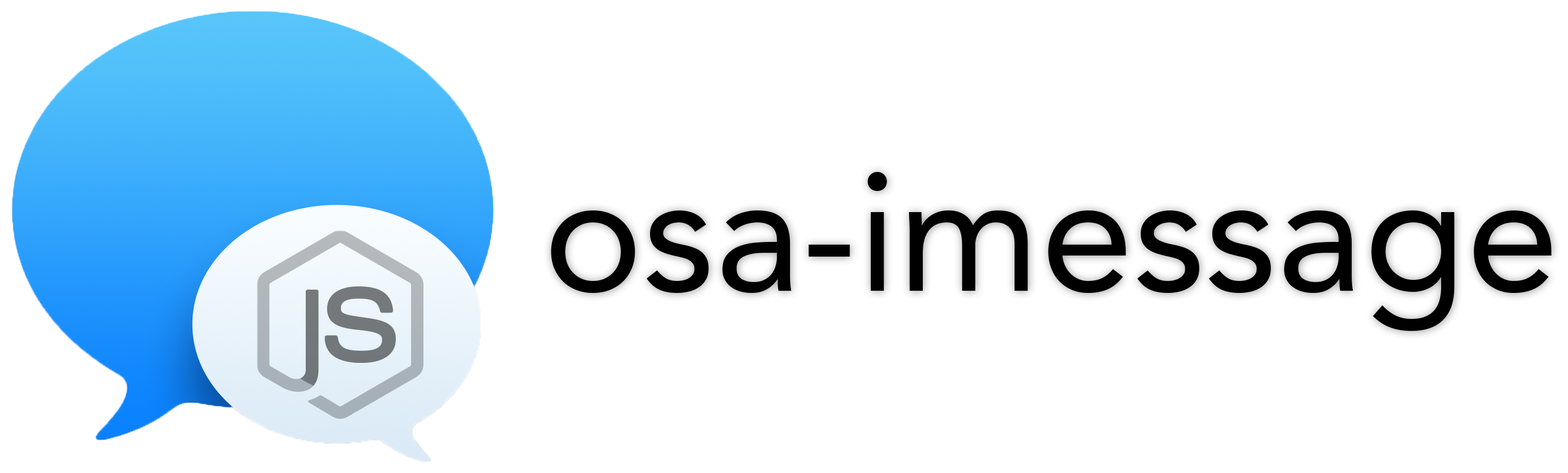
<style>
.page{position:relative;width:1568px;height:473px;background:#ffffff}
.page>*{position:absolute;margin:0}
.t1{font:167.7px "Avenir-Roman";color:#000000}
</style>
<div class="page">
<p class="t1" style="left:551px;top:172px;width:1001px;height:159px">osa-imessage</p>
</div>
